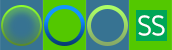
<style>
.page{position:relative;width:172px;height:50px;background:#53c800}
.page>*{position:absolute;margin:0}
.t1{font:30px "Gidole-Regular";letter-spacing:-0.02em;color:#ffffff}
</style>
<div class="page">
<p class="t1" style="left:138px;top:15px;width:27px;height:21px">SS</p>
</div>
